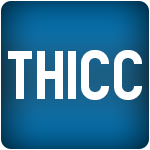
<style>
.page{position:relative;width:150px;height:150px}
.page>*{position:absolute;margin:0}
.t1{font:62.5px "Nostromo-Cond";color:#ffffff}
</style>
<div class="page">
<p class="t1" style="left:8px;top:50px;width:134px;height:50px">ThICC</p>
</div>
